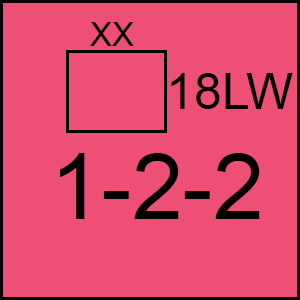
<style>
.page{position:relative;width:300px;height:300px;background:#ee4f74}
.page>*{position:absolute;margin:0}
.t1{font:33.3px "ArialMT";color:#000000}
.t2{font:50px "ArialMT";color:#000000}
.t3{font:91.7px "ArialMT";color:#000000}
</style>
<div class="page">
<p class="t1" style="left:90px;top:22px;width:44px;height:24px">XX</p>
<p class="t2" style="left:171px;top:73px;width:122px;height:36px">18LW</p>
<p class="t3" style="left:60px;top:153px;width:200px;height:66px">1-2-2</p>
</div>
